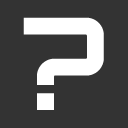
<style>
.page{position:relative;width:128px;height:128px;background:#333333}
.page>*{position:absolute;margin:0}
.t1{font:128px "Orbitron-Bold";letter-spacing:-0.01em;color:#ffffff}
</style>
<div class="page">
<p class="t1" style="left:23px;top:17px;width:81px;height:93px">?</p>
</div>
